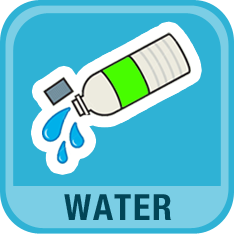
<style>
.page{position:relative;width:234px;height:234px;background:#2fb2d5}
.page>*{position:absolute;margin:0}
.t1{font:36px "HelveticaNeue-BoldCond";letter-spacing:0.04em;color:#024557}
</style>
<div class="page">
<p class="t1" style="left:64px;top:194px;width:108px;height:26px">WATER</p>
</div>
